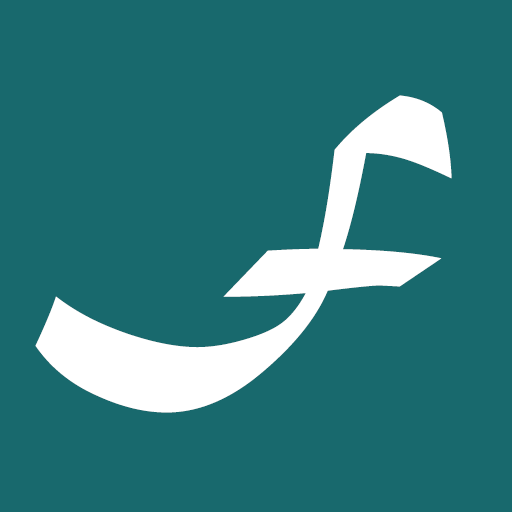
<style>
.page{position:relative;width:512px;height:512px;background:#18696d}
.page>*{position:absolute;margin:0}
.t1{font:345.4px "MaturaMTScriptCapitals";color:#ffffff}
</style>
<div class="page">
<p class="t1" style="left:35px;top:95px;width:417px;height:318px">F</p>
</div>
